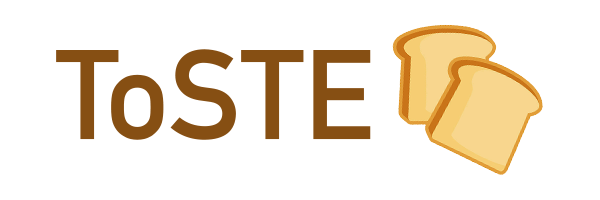
<style>
.page{position:relative;width:600px;height:200px;background:#ffffff}
.page>*{position:absolute;margin:0}
.t1{font:125.5px "DINAlternate-Bold";color:#864f13}
</style>
<div class="page">
<p class="t1" style="left:56px;top:49px;width:315px;height:91px">ToSTE</p>
</div>
